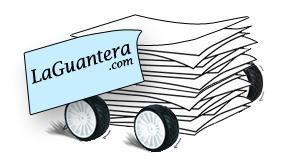
<style>
.page{position:relative;width:290px;height:166px;background:#ffffff}
.page>*{position:absolute;margin:0}
.t1{font:18.1px "LucidaBright-Italic";color:#000000}
.t2{font:11.1px "LucidaBright-Italic";color:#000000}
</style>
<div class="page">
<p class="t1" style="left:31px;top:43px;width:101px;height:41px;rotate:-17deg">LaGuantera</p>
<p class="t2" style="left:109px;top:58px;width:25px;height:13px;rotate:-15deg">.com</p>
</div>
